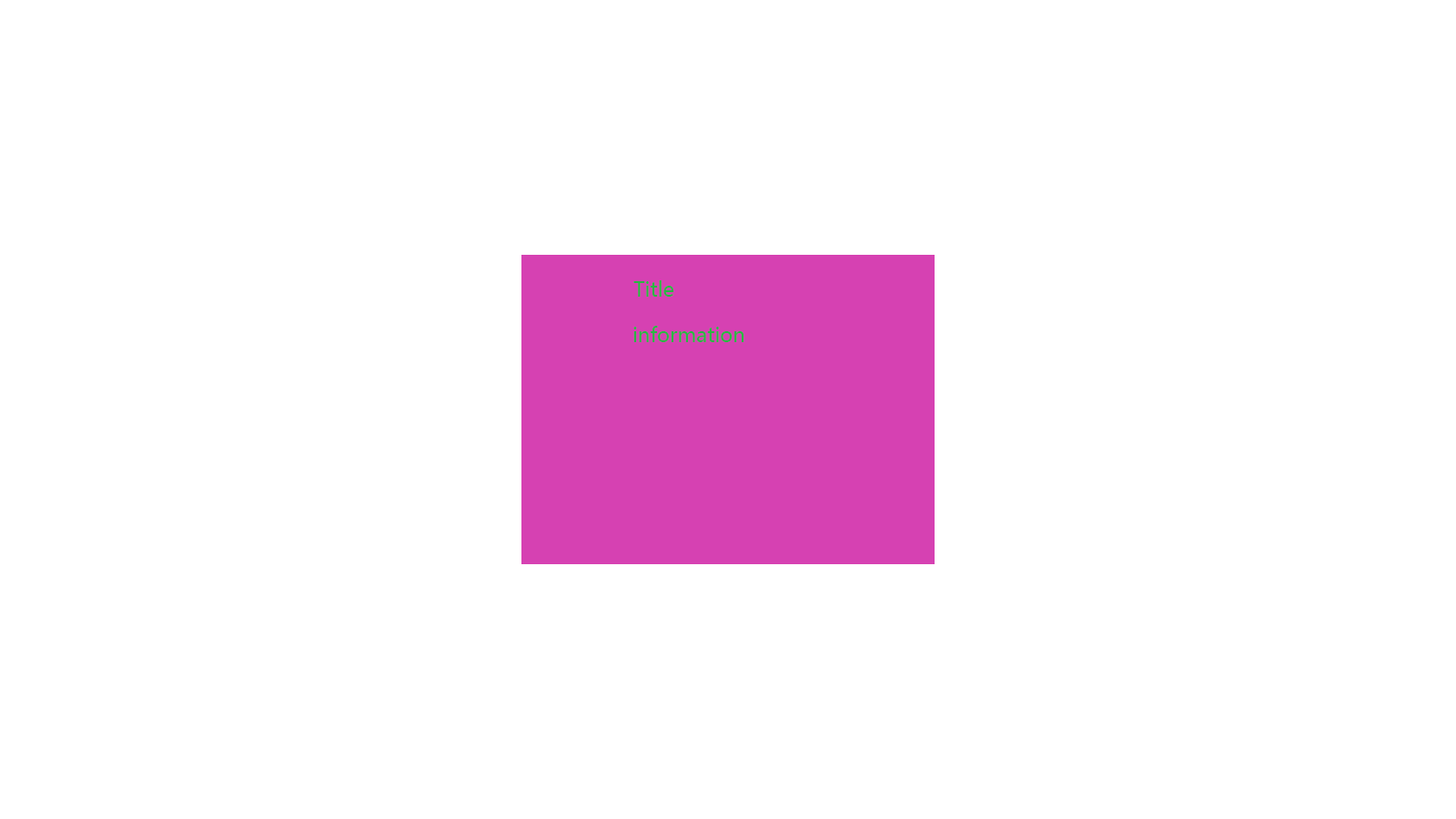
<style>
.page{position:relative;width:1456px;height:819px;background:#ffffff}
.page>*{position:absolute;margin:0}
.t1{font:20px "MicrosoftYaHei";color:#28b743}
</style>
<div class="page">
<p class="t1" style="left:633px;top:280px;width:41px;height:17px">Title</p>
<p class="t1" style="left:633px;top:326px;width:111px;height:16px">information</p>
</div>
